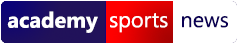
<style>
.page{position:relative;width:238px;height:44px;background:#ffffff}
.page>*{position:absolute;margin:0}
.t1{font:21.7px "SegoeUI-Bold";color:#ffffff}
.t2{font:21.7px "SegoeUI";color:#ffffff}
.t3{font:21.7px "SegoeUI";color:#0a0054}
</style>
<div class="page">
<p class="t1" style="left:7px;top:11px;width:91px;height:22px">academy</p>
<p class="t2" style="left:110px;top:13px;width:58px;height:20px">sports</p>
<p class="t3" style="left:182px;top:16px;width:46px;height:12px">news</p>
</div>
